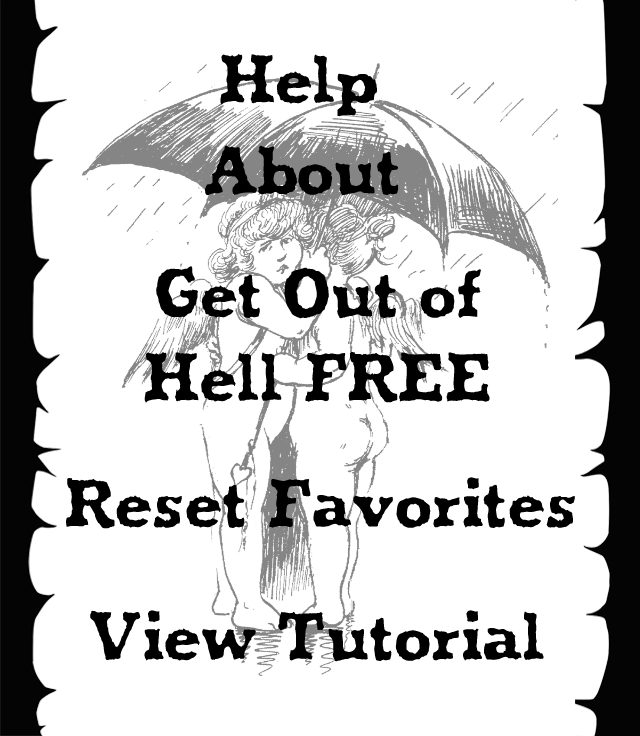
<style>
.page{position:relative;width:640px;height:736px;background:#ffffff}
.page>*{position:absolute;margin:0}
.t1{font:70px "KingGeorgeBoldClean";color:#000000}
</style>
<div class="page">
<p class="t1" style="left:220px;top:54px;width:157px;height:63px">Help</p>
<p class="t1" style="left:204px;top:145px;width:195px;height:51px">About</p>
<p class="t1" style="left:144px;top:266px;width:346px;height:137px;text-align:center">Get Out of<br>Hell FREE</p>
<p class="t1" style="left:66px;top:477px;width:509px;height:52px">Reset Favorites</p>
<p class="t1" style="left:90px;top:610px;width:454px;height:52px">View Tutorial</p>
</div>
